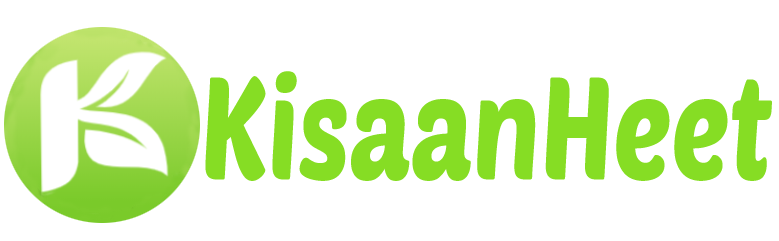
<style>
.page{position:relative;width:779px;height:241px;background:#ffffff}
.page>*{position:absolute;margin:0}
.t1{font:143.1px "PoetsenOne-Regular";color:#86dd24;scale:0.76 1}
</style>
<div class="page">
<p class="t1" style="left:205px;top:71px;width:567px;height:110px">KisaanHeet</p>
</div>
